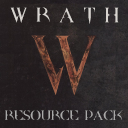
<style>
.page{position:relative;width:128px;height:128px}
.page>*{position:absolute;margin:0}
.t1{font:18px "QUAKE2";color:#d8d4d0}
.t2{font:12px "QUAKE2";color:#aaa9a9}
</style>
<div class="page">
<p class="t1" style="left:10px;top:7px;width:109px;height:17px">W R A T H</p>
<p class="t2" style="left:5px;top:110px;width:118px;height:10px">RESOURCE PACK</p>
</div>
